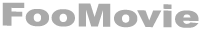
<style>
.page{position:relative;width:200px;height:34px;background:#ffffff}
.page>*{position:absolute;margin:0}
.t1{font:31.7px "Arial-Black";color:#aaaaaa;scale:1.22 1}
</style>
<div class="page">
<p class="t1" style="left:2px;top:2px;width:197px;height:26px;rotate:1deg">FooMovie</p>
</div>
